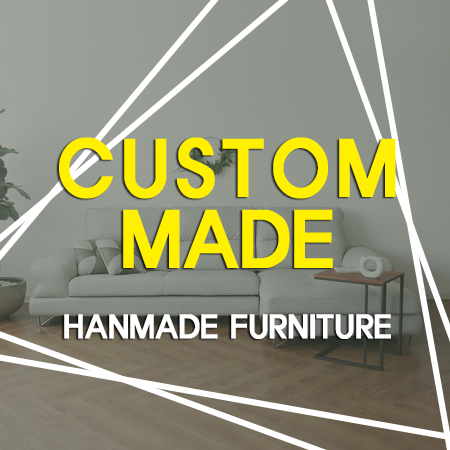
<style>
.page{position:relative;width:450px;height:450px}
.page>*{position:absolute;margin:0}
.t1{font:30.5px/71px "ÈÞ¸Õ¿¢½ºÆ÷";color:#ffffff;font-weight:bold;scale:0.89 1}
.t2{font:73.2px/71px "ÈÞ¸Õ¿¢½ºÆ÷";color:#fff000;font-weight:bold;scale:0.89 1}
</style>
<div class="page">
<p class="t1" style="left:59px;top:137px;width:337px;height:202px;text-align:justify"><span class="t2">CUSTOM MADE<br></span>HANMADE FURNITURE</p>
</div>
